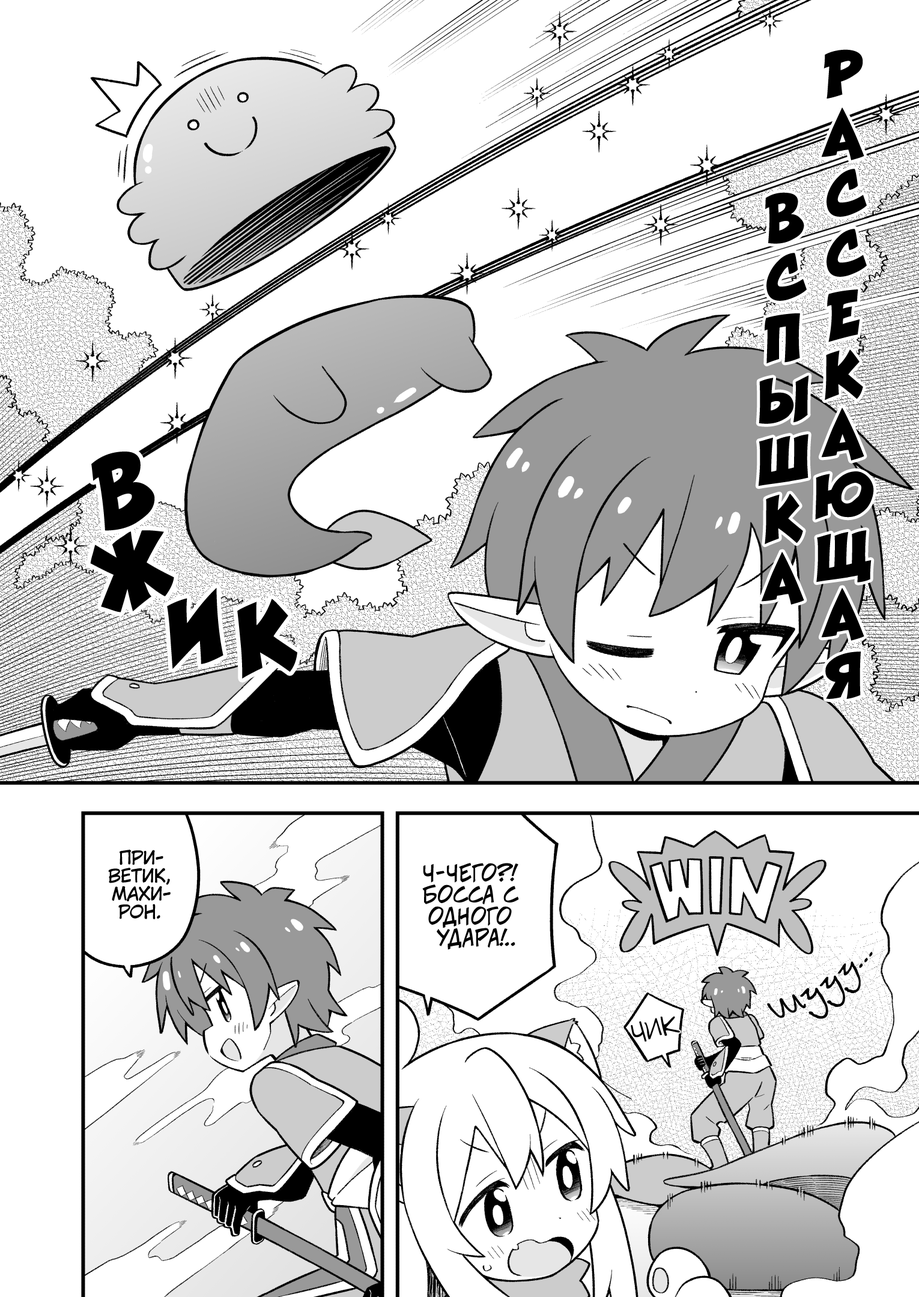
<style>
.page{position:relative;width:919px;height:1297px;background:#ffffff}
.page>*{position:absolute;margin:0}
.t1{font:60.1px "v_CCRatatatat";color:#000000;text-transform:uppercase}
.t2{font:90.1px "v_CCRatatatat";color:#000000;text-transform:uppercase}
.t3{font:18px "KuraiVoice2";color:#000000;text-transform:uppercase}
.t4{font:21.6px "v_CCJeffCampbell";color:#000000;text-transform:uppercase}
.t5{font:18px "v_CCJeffCampbell";color:#000000;text-transform:uppercase}
.t6{font:45.1px "BetinaScriptC";color:#000000}
.t7{font:45.1px "BetinaScriptC";color:#000000;font-variant:small-caps}
.t8{font:27px "v_Augie";color:#000000;text-transform:uppercase;scale:0.9 1}
</style>
<div class="page">
<p class="t1" style="left:758px;top:49px;width:116px;height:650px;text-align:center">Рассекающая<br>вспышка</p>
<p class="t2" style="left:91px;top:452px;width:64px;height:79px;rotate:-8deg">в</p>
<p class="t2" style="left:90px;top:530px;width:84px;height:83px;rotate:-16deg">ж</p>
<p class="t2" style="left:167px;top:588px;width:56px;height:81px;rotate:-6deg">и</p>
<p class="t2" style="left:237px;top:599px;width:60px;height:80px;rotate:-6deg">к</p>
<p class="t3" style="left:108px;top:850px;width:63px;height:70px;text-align:center">При-<br>ветик,<br>Махи-<br>рон.</p>
<p class="t4" style="left:422px;top:863px;width:97px;height:87px;text-align:center">Ч-чего?!<br>Босса с<br>одного<br>удара!<span class="t5">..</span></p>
<p class="t6" style="left:767px;top:952px;width:106px;height:67px;rotate:-33deg"><span class="t7">ш</span>ууу...</p>
<p class="t8" style="left:631px;top:1016px;width:49px;height:26px;rotate:-14deg">чик</p>
</div>
